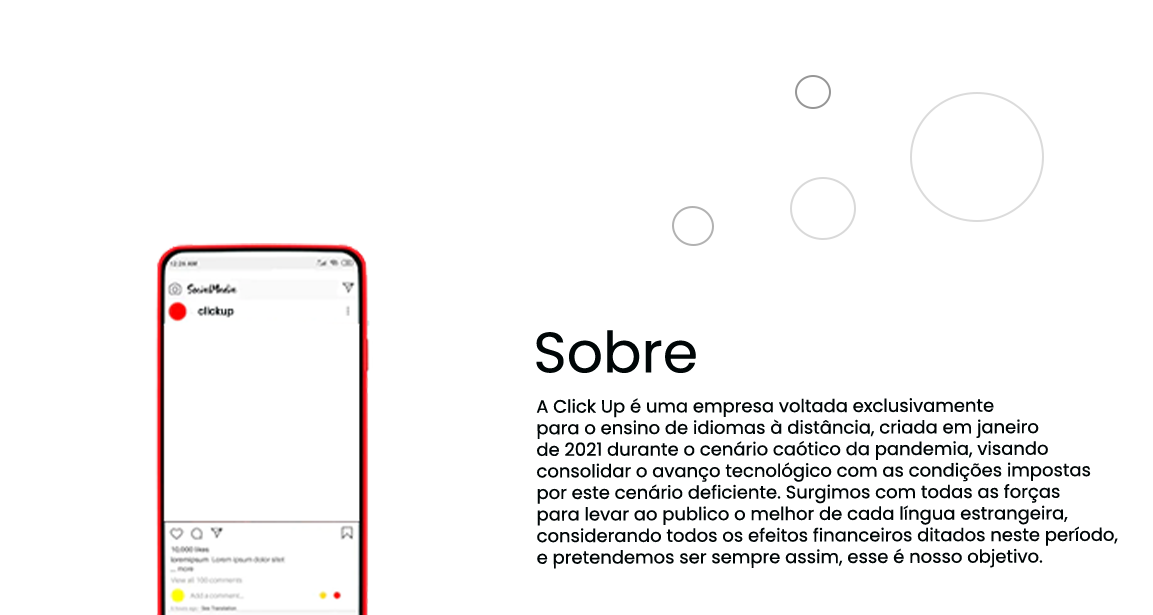
<style>
.page{position:relative;width:1153px;height:615px;background:#ffffff}
.page>*{position:absolute;margin:0}
.t1{font:56.9px "Poppins-Regular";color:#000607}
.t2{font:18px "Poppins-Regular";color:#000607}
</style>
<div class="page">
<p class="t1" style="left:536px;top:330px;width:160px;height:43px">Sobre</p>
<p class="t2" style="left:536px;top:398px;width:582px;height:171px">A Click Up é uma empresa voltada exclusivamente <br>para o ensino de idiomas à distância, criada em janeiro<br>de 2021 durante o cenário caótico da pandemia, visando<br>consolidar o avanço tecnológico com as condições impostas<br>por este cenário deficiente. Surgimos com todas as forças<br>para levar ao publico o melhor de cada língua estrangeira, <br>considerando todos os efeitos financeiros ditados neste período, <br>e pretendemos ser sempre assim, esse é nosso objetivo.</p>
</div>
